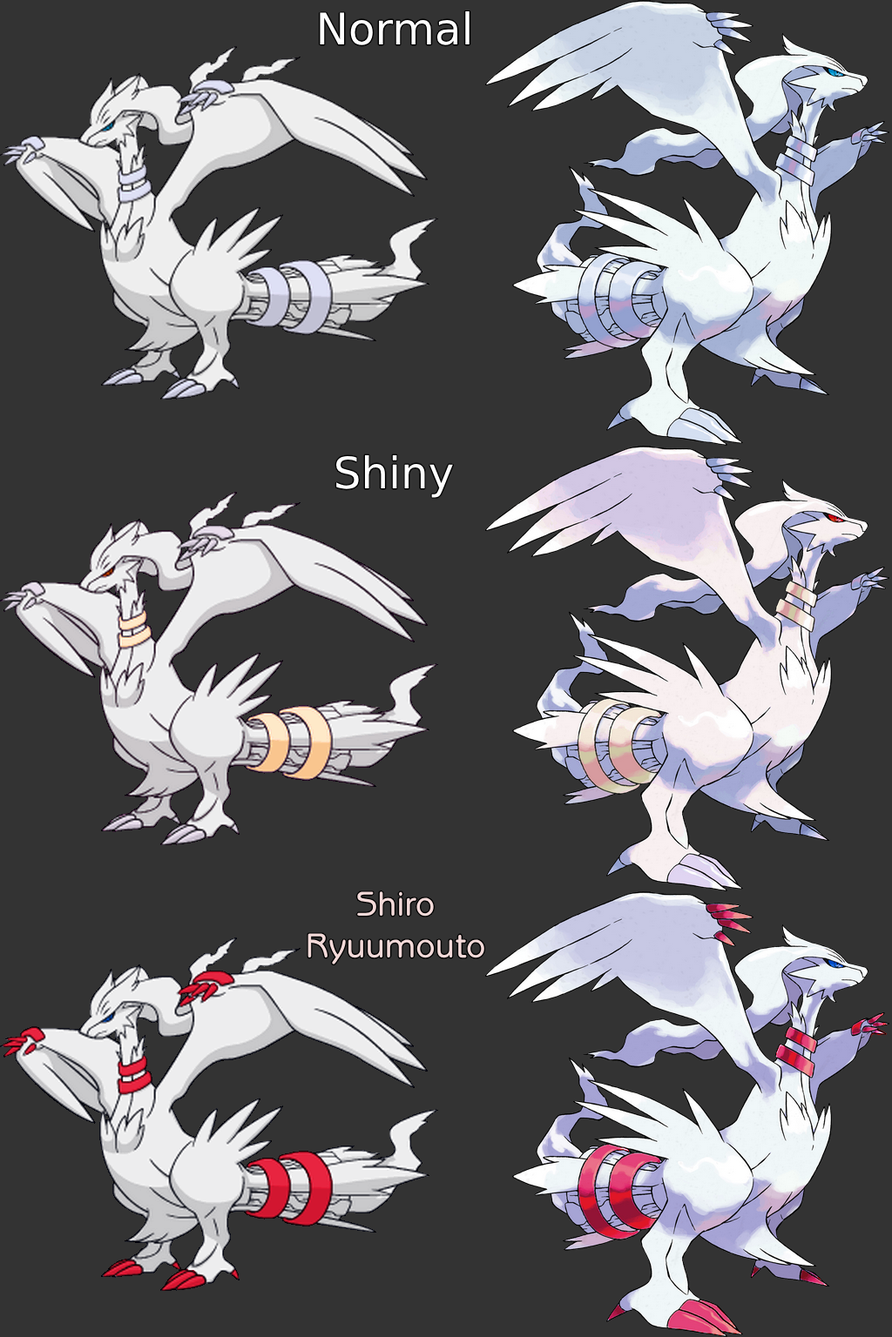
<style>
.page{position:relative;width:892px;height:1337px;background:#333333}
.page>*{position:absolute;margin:0}
.t1{font:43.5px "DejaVuSans";color:#ffffff}
.t2{font:34.8px "BenguiatGothicStd-Medium";color:#f3dad9}
</style>
<div class="page">
<p class="t1" style="left:320px;top:11px;width:149px;height:34px">Normal</p>
<p class="t1" style="left:335px;top:455px;width:118px;height:43px">Shiny</p>
<p class="t2" style="left:307px;top:892px;width:177px;height:73px;text-align:center">Shiro<br>Ryuumouto</p>
</div>
